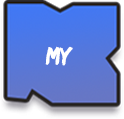
<style>
.page{position:relative;width:124px;height:119px}
.page>*{position:absolute;margin:0}
.t1{font:24px "EdoSZ";color:#ffffff}
</style>
<div class="page">
<p class="t1" style="left:45px;top:46px;width:28px;height:20px">my</p>
</div>
